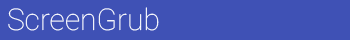
<style>
.page{position:relative;width:350px;height:40px;background:#3f51b5}
.page>*{position:absolute;margin:0}
.t1{font:30px "Roboto-Thin";color:#ffffff}
</style>
<div class="page">
<p class="t1" style="left:8px;top:7px;width:151px;height:24px">ScreenGrub</p>
</div>
